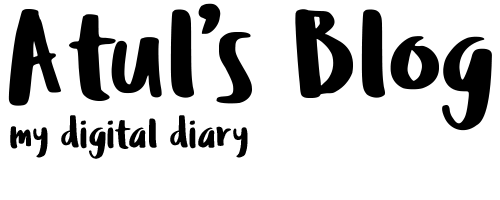
<style>
.page{position:relative;width:500px;height:200px;background:#ffffff}
.page>*{position:absolute;margin:0}
.t1{font:41.7px "Ludicrous";color:#000000}
.t2{font:125px "Ludicrous";color:#000000}
</style>
<div class="page">
<p class="t1" style="left:8px;top:3px;width:484px;height:156px"><span class="t2">Atul’s Blog<br></span>my digital diary</p>
</div>
